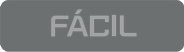
<style>
.page{position:relative;width:184px;height:52px;background:#6c7070}
.page>*{position:absolute;margin:0}
.t1{font:24px "KafuTechnoStd-HV";letter-spacing:0.024em;color:#a0a2a2}
</style>
<div class="page">
<p class="t1" style="left:51px;top:9px;width:86px;height:28px">FÁCIL</p>
</div>
